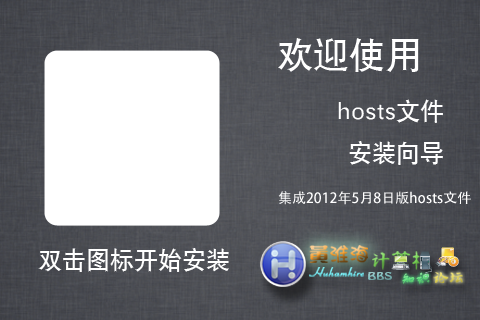
<style>
.page{position:relative;width:480px;height:320px;background:#ffffff}
.page>*{position:absolute;margin:0}
.t1{font:36px "SIL-Hei-Med-Jian";color:#ffffff}
.t2{font:24px "SIL-Hei-Med-Jian";color:#ffffff}
.t3{font:14px "AdobeHeitiStd-Regular";color:#ffffff}
</style>
<div class="page">
<p class="t1" style="left:278px;top:38px;width:141px;height:34px">欢迎使用</p>
<p class="t2" style="left:338px;top:99px;width:105px;height:66px;text-align:right">hosts文件<br>安装向导</p>
<p class="t3" style="left:278px;top:191px;width:193px;height:14px">集成2012年5月8日版hosts文件</p>
<p class="t2" style="left:38px;top:248px;width:191px;height:24px">双击图标开始安装</p>
</div>
